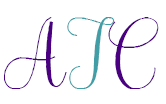
<style>
.page{position:relative;width:166px;height:104px;background:#ffffff}
.page>*{position:absolute;margin:0}
.t1{font:83.3px "Balqis";letter-spacing:0.05em;color:#4b0082}
.t2{font:83.3px "Balqis";letter-spacing:0.05em;color:#429ea6}
</style>
<div class="page">
<p class="t1" style="left:4px;top:17px;width:155px;height:72px">A<span class="t2">J</span>C</p>
</div>
